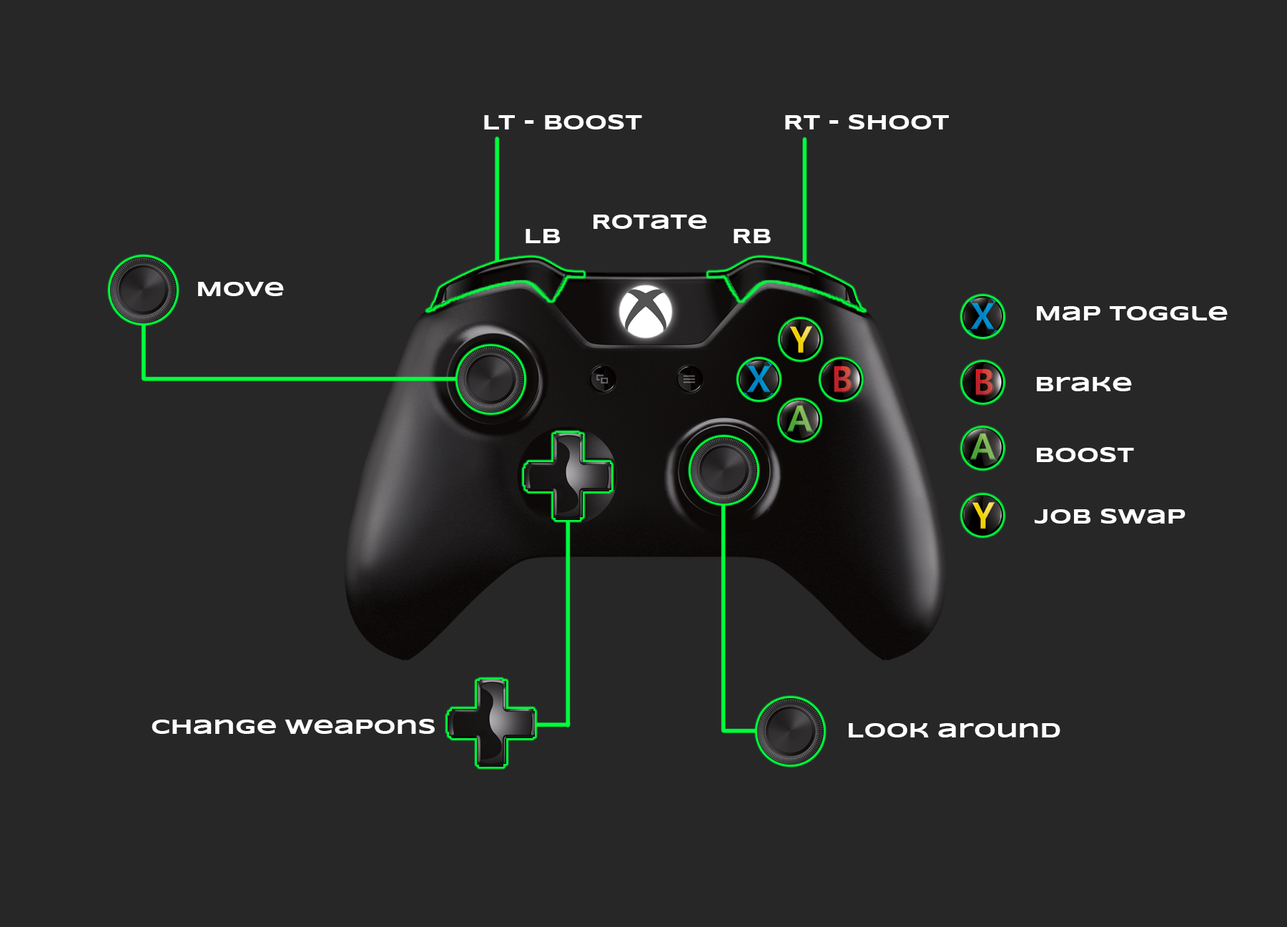
<style>
.page{position:relative;width:1287px;height:927px;background:#272727}
.page>*{position:absolute;margin:0}
.t1{font:21.4px "Syncopate-Bold";color:#ffffff}
</style>
<div class="page">
<p class="t1" style="left:484px;top:114px;width:158px;height:15px">LT - Boost</p>
<p class="t1" style="left:785px;top:114px;width:164px;height:15px">RT - Shoot</p>
<p class="t1" style="left:593px;top:214px;width:114px;height:15px">Rotate</p>
<p class="t1" style="left:525px;top:229px;width:36px;height:14px">LB</p>
<p class="t1" style="left:734px;top:229px;width:37px;height:14px">RB</p>
<p class="t1" style="left:198px;top:282px;width:86px;height:14px">Move</p>
<p class="t1" style="left:1037px;top:306px;width:191px;height:14px">Map Toggle</p>
<p class="t1" style="left:1037px;top:377px;width:95px;height:14px">Brake</p>
<p class="t1" style="left:1037px;top:447px;width:97px;height:15px">Boost</p>
<p class="t1" style="left:1035px;top:508px;width:150px;height:15px">Job Swap</p>
<p class="t1" style="left:152px;top:719px;width:283px;height:15px">Change Weapons</p>
<p class="t1" style="left:849px;top:723px;width:211px;height:14px">Look around</p>
</div>
